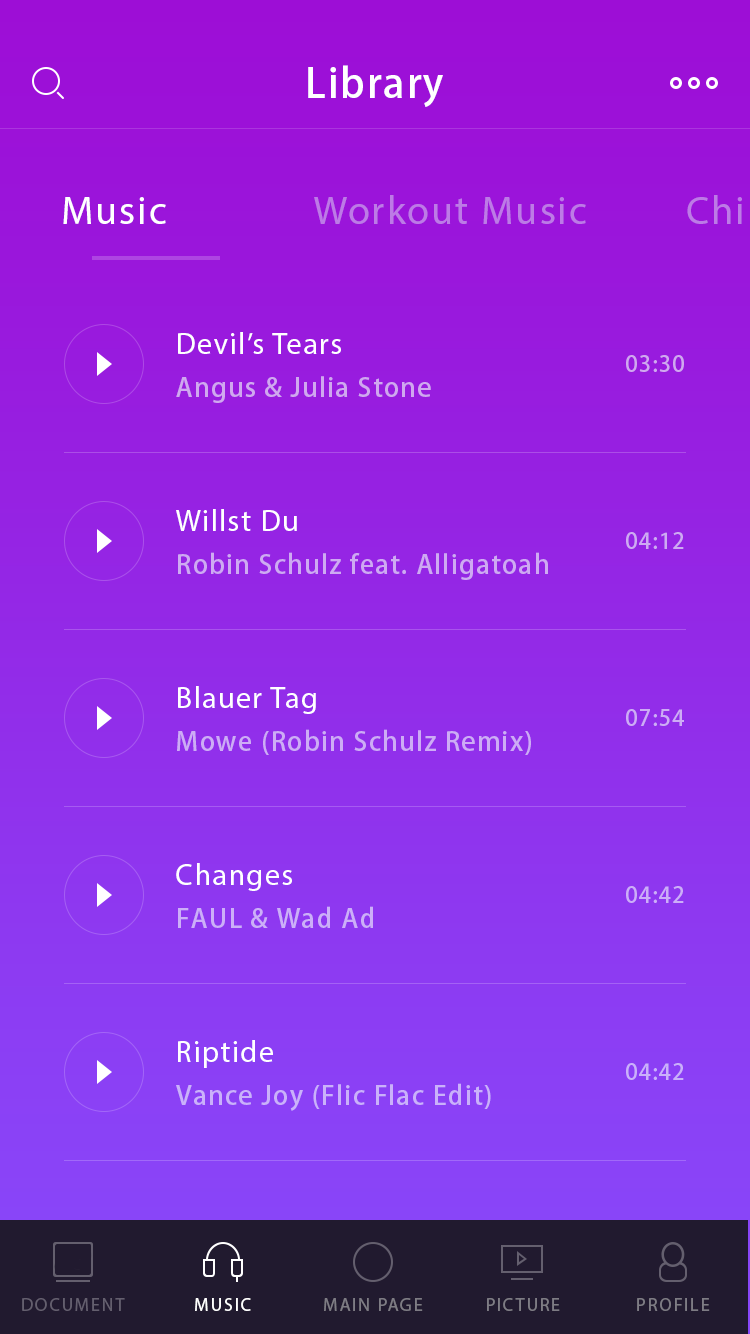
<style>
.page{position:relative;width:750px;height:1334px}
.page>*{position:absolute;margin:0}
.t1{font:40px "AdobeHeitiStd-Regular";letter-spacing:0.05em;color:#ffffff}
.t2{font:40px "MyriadPro-Regular";letter-spacing:0.05em;color:#ffffff}
.t3{font:40px "MyriadPro-Regular";letter-spacing:0.05em;color:#bd7be6}
.t4{font:30px "MyriadPro-Regular";letter-spacing:0.05em;color:#ffffff}
.t5{font:22px "AdobeHeitiStd-Regular";letter-spacing:0.05em;color:#d0a8ef}
.t6{font:26px "AdobeHeitiStd-Regular";letter-spacing:0.05em;color:#d0a8ef}
.t7{font:22px "AdobeHeitiStd-Regular";letter-spacing:0.05em;color:#ceaaf2}
.t8{font:26px "AdobeHeitiStd-Regular";letter-spacing:0.05em;color:#ceaaf2}
.t9{font:22px "AdobeHeitiStd-Regular";letter-spacing:0.05em;color:#cdacf5}
.t10{font:26px "AdobeHeitiStd-Regular";letter-spacing:0.05em;color:#cdacf5}
.t11{font:22px "AdobeHeitiStd-Regular";letter-spacing:0.05em;color:#ccaef8}
.t12{font:26px "AdobeHeitiStd-Regular";letter-spacing:0.05em;color:#ccaff8}
.t13{font:22px "AdobeHeitiStd-Regular";letter-spacing:0.05em;color:#cab0fa}
.t14{font:26px "AdobeHeitiStd-Regular";letter-spacing:0.05em;color:#cab1fa}
.t15{font:18px "MyriadPro-Regular";letter-spacing:0.1em;color:#ffffff;text-transform:uppercase}
.t16{font:18px "MyriadPro-Regular";letter-spacing:0.1em;color:#7e7c84;text-transform:uppercase}
</style>
<div class="page">
<p class="t1" style="left:308px;top:65px;width:135px;height:42px">Library</p>
<p class="t2" style="left:63px;top:197px;width:103px;height:27px">Music</p>
<p class="t3" style="left:314px;top:195px;width:272px;height:29px">Workout Music</p>
<p class="t4" style="left:178px;top:332px;width:163px;height:22px">Devil’s Tears</p>
<p class="t5" style="left:626px;top:355px;width:58px;height:17px">03:30</p>
<p class="t6" style="left:176px;top:376px;width:255px;height:27px">Angus &amp; Julia Stone</p>
<p class="t4" style="left:176px;top:509px;width:121px;height:22px">Willst Du</p>
<p class="t7" style="left:626px;top:532px;width:58px;height:17px">04:12</p>
<p class="t8" style="left:178px;top:552px;width:370px;height:28px">Robin Schulz feat. Alligatoah</p>
<p class="t4" style="left:178px;top:686px;width:138px;height:28px">Blauer Tag</p>
<p class="t9" style="left:626px;top:709px;width:58px;height:17px">07:54</p>
<p class="t10" style="left:177px;top:729px;width:354px;height:26px">Mowe (Robin Schulz Remix)</p>
<p class="t4" style="left:176px;top:863px;width:116px;height:28px">Changes</p>
<p class="t11" style="left:626px;top:886px;width:58px;height:17px">04:42</p>
<p class="t12" style="left:178px;top:906px;width:195px;height:22px">FAUL &amp; Wad Ad</p>
<p class="t4" style="left:178px;top:1040px;width:95px;height:28px">Riptide</p>
<p class="t13" style="left:626px;top:1063px;width:58px;height:17px">04:42</p>
<p class="t14" style="left:176px;top:1083px;width:315px;height:28px">Vance Joy (Flic Flac Edit)</p>
<p class="t15" style="left:195px;top:1298px;width:56px;height:13px">MUSIC</p>
<p class="t16" style="left:324px;top:1298px;width:99px;height:13px">MAIN PAGE</p>
<p class="t16" style="left:487px;top:1298px;width:73px;height:13px">PICTURE</p>
<p class="t16" style="left:637px;top:1298px;width:73px;height:13px">profile</p>
</div>
